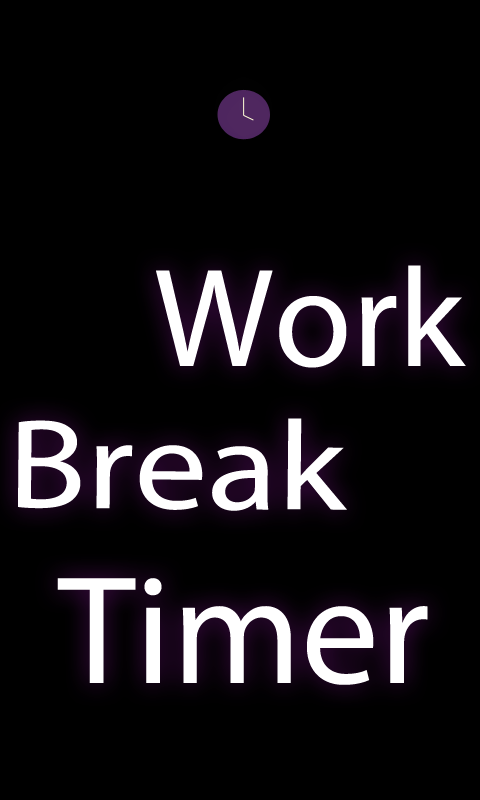
<style>
.page{position:relative;width:480px;height:800px;background:#000000}
.page>*{position:absolute;margin:0}
.t1{font:141.5px "MyriadPro-Regular";color:#ffffff}
.t2{font:127.6px "MyriadPro-Regular";color:#ffffff;scale:1.14 1}
</style>
<div class="page">
<p class="t1" style="left:156px;top:265px;width:310px;height:103px">Work</p>
<p class="t2" style="left:18px;top:418px;width:329px;height:93px;rotate:1deg">Break</p>
</div>
